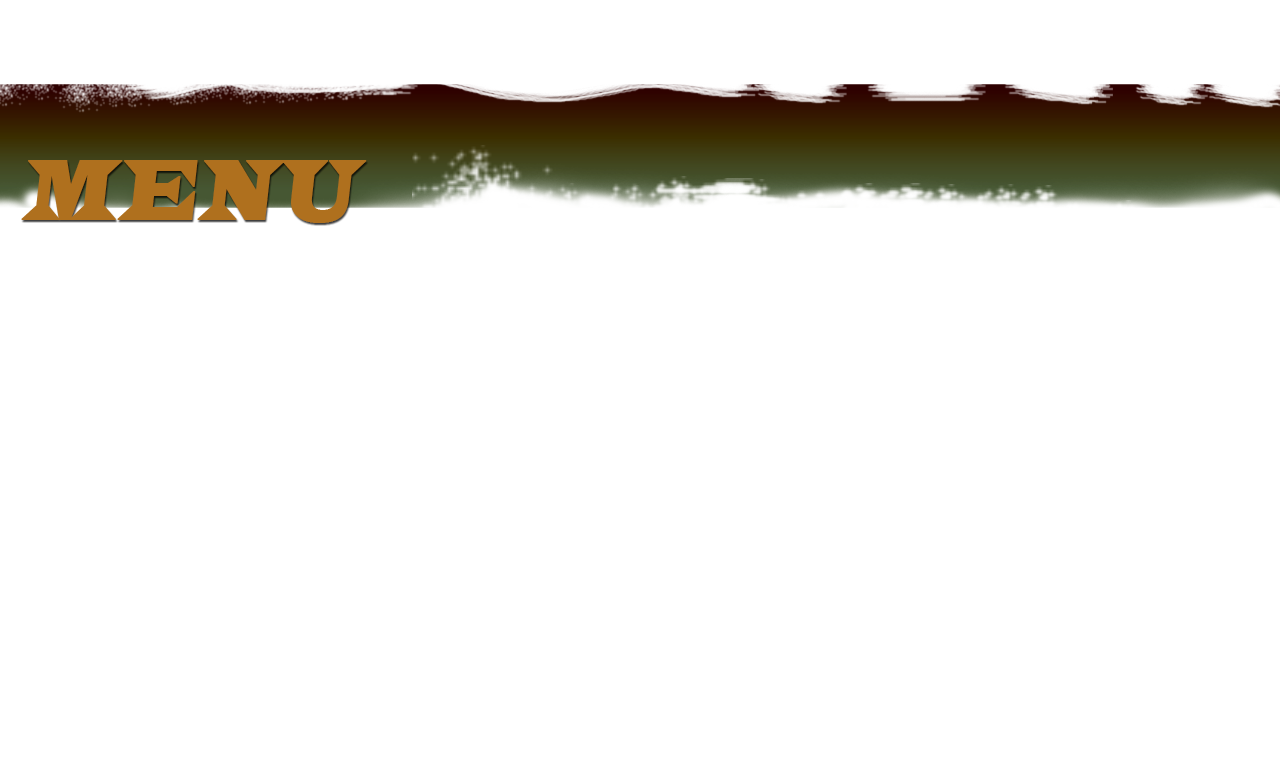
<style>
.page{position:relative;width:1280px;height:768px;background:#ffffff}
.page>*{position:absolute;margin:0}
.t1{font:88.2px "LatinWide";color:#af701e;font-weight:bold;font-style:italic;scale:0.63 1}
</style>
<div class="page">
<p class="t1" style="left:21px;top:160px;width:346px;height:63px">MENU</p>
</div>
